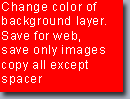
<style>
.page{position:relative;width:130px;height:99px;background:#ff0000}
.page>*{position:absolute;margin:0}
.t1{font:12px "ArialMT";letter-spacing:0.05em;color:#ffffff}
</style>
<div class="page">
<p class="t1" style="left:2px;top:2px;width:104px;height:83px">Change color of<br>background layer.<br>Save for web,<br>save only images<br>copy all except<br>spacer</p>
</div>
